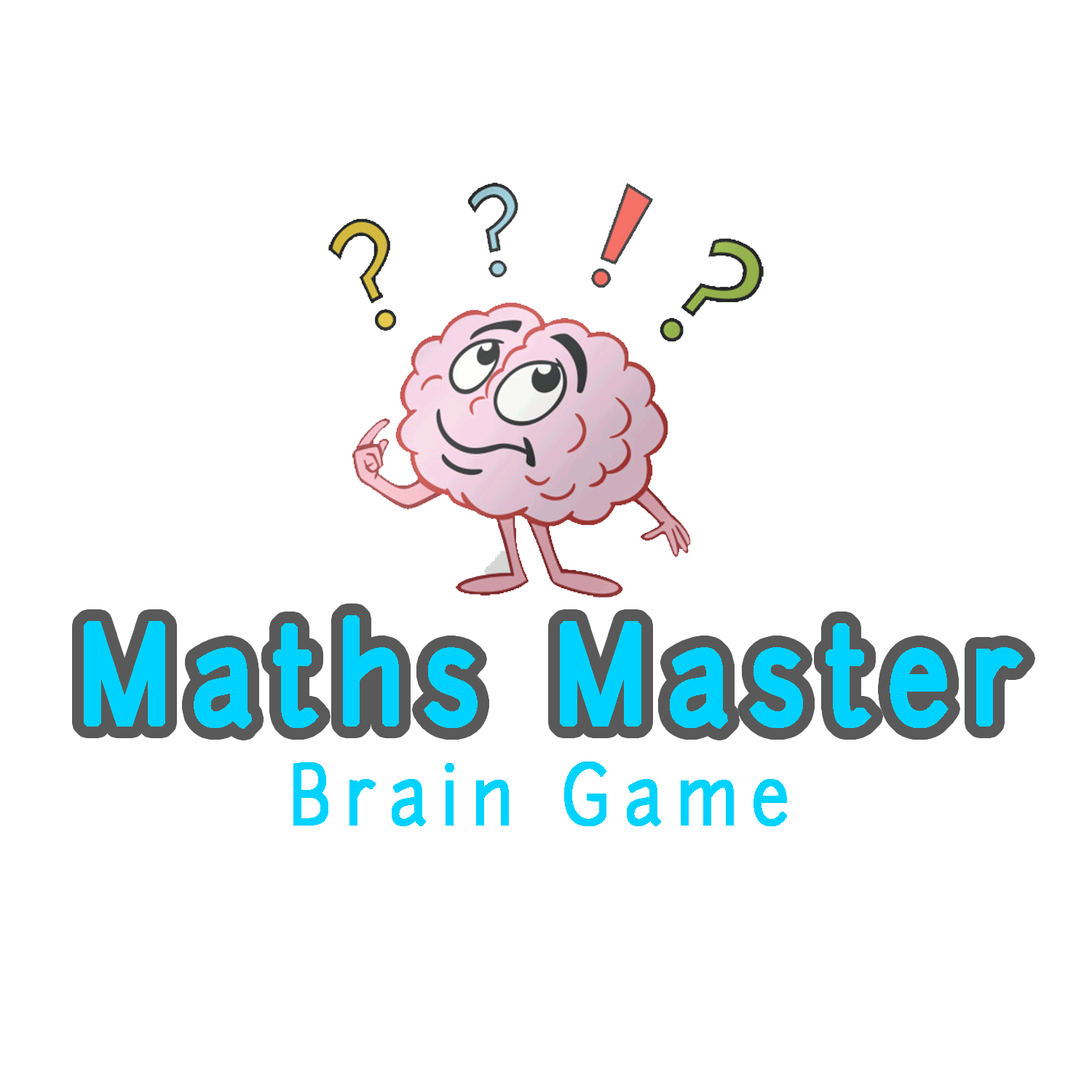
<style>
.page{position:relative;width:1092px;height:1092px;background:#ffffff}
.page>*{position:absolute;margin:0}
.t1{font:126.5px "Junction";letter-spacing:0.2em;color:#00d2ff;font-weight:bold;scale:0.85 1}
.t2{font:79.7px "Junction";letter-spacing:0.2em;color:#00d2ff;font-weight:bold;scale:0.85 1}
</style>
<div class="page">
<p class="t1" style="left:84px;top:615px;width:940px;height:114px">Maths Master</p>
<p class="t2" style="left:293px;top:761px;width:494px;height:65px">Brain Game</p>
</div>
